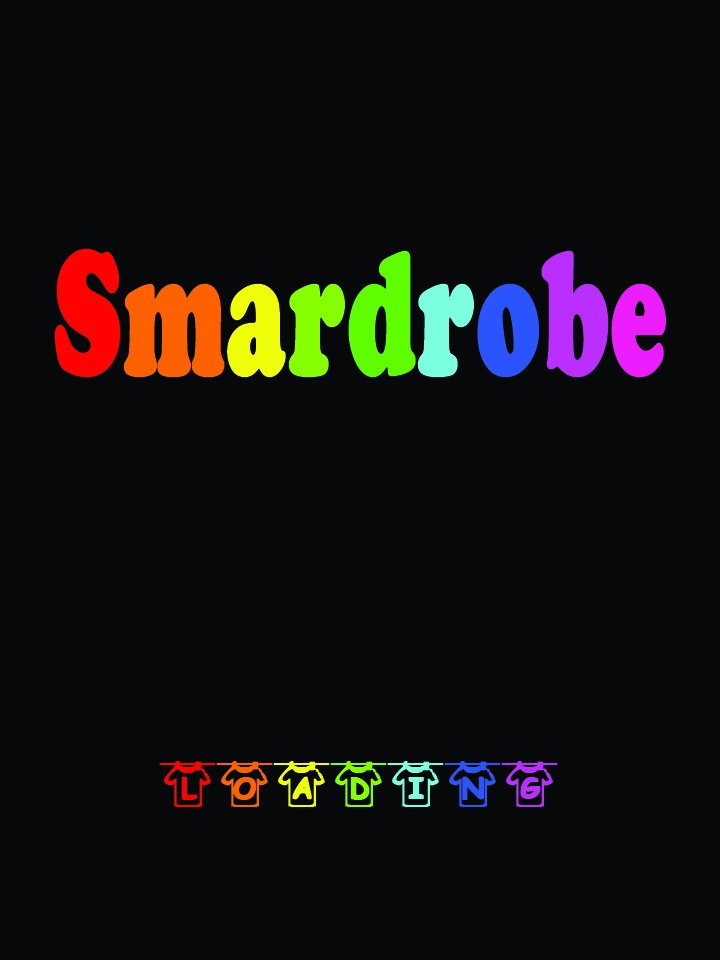
<style>
.page{position:relative;width:720px;height:960px;background:#070809}
.page>*{position:absolute;margin:0}
.t1{font:182.6px "CooperBlack";color:#ff0200;font-weight:bold;scale:0.57 1}
.t2{font:182.6px "CooperBlack";color:#ff6100;font-weight:bold;scale:0.57 1}
.t3{font:182.6px "CooperBlack";color:#efff09;font-weight:bold;scale:0.57 1}
.t4{font:182.6px "CooperBlack";color:#86ff00;font-weight:bold;scale:0.57 1}
.t5{font:182.6px "CooperBlack";color:#5fff00;font-weight:bold;scale:0.57 1}
.t6{font:182.6px "CooperBlack";color:#7bffdf;font-weight:bold;scale:0.57 1}
.t7{font:182.6px "CooperBlack";color:#2b54ff;font-weight:bold;scale:0.57 1}
.t8{font:182.6px "CooperBlack";color:#ba2fff;font-weight:bold;scale:0.57 1}
.t9{font:182.6px "CooperBlack";color:#ec1dff;font-weight:bold;scale:0.57 1}
.t10{font:65px "Summer'sClothesline";color:#ff0200;font-weight:bold}
.t11{font:65px "Summer'sClothesline";color:#ff6100;font-weight:bold}
.t12{font:65px "Summer'sClothesline";color:#efff09;font-weight:bold}
.t13{font:65px "Summer'sClothesline";color:#86ff00;font-weight:bold}
.t14{font:65px "Summer'sClothesline";color:#7bffdf;font-weight:bold}
.t15{font:65px "Summer'sClothesline";color:#2b54ff;font-weight:bold}
.t16{font:65px "Summer'sClothesline";color:#ba2fff;font-weight:bold}
</style>
<div class="page">
<p class="t1" style="left:54px;top:248px;width:612px;height:130px">S<span class="t2">m</span><span class="t3">a</span><span class="t4">r</span><span class="t5">d</span><span class="t6">r</span><span class="t7">o</span><span class="t8">b</span><span class="t9">e</span></p>
<p class="t10" style="left:159px;top:761px;width:399px;height:46px">l<span class="t11">o</span><span class="t12">a</span><span class="t13">d</span><span class="t14">i</span><span class="t15">n</span><span class="t16">g</span></p>
</div>
